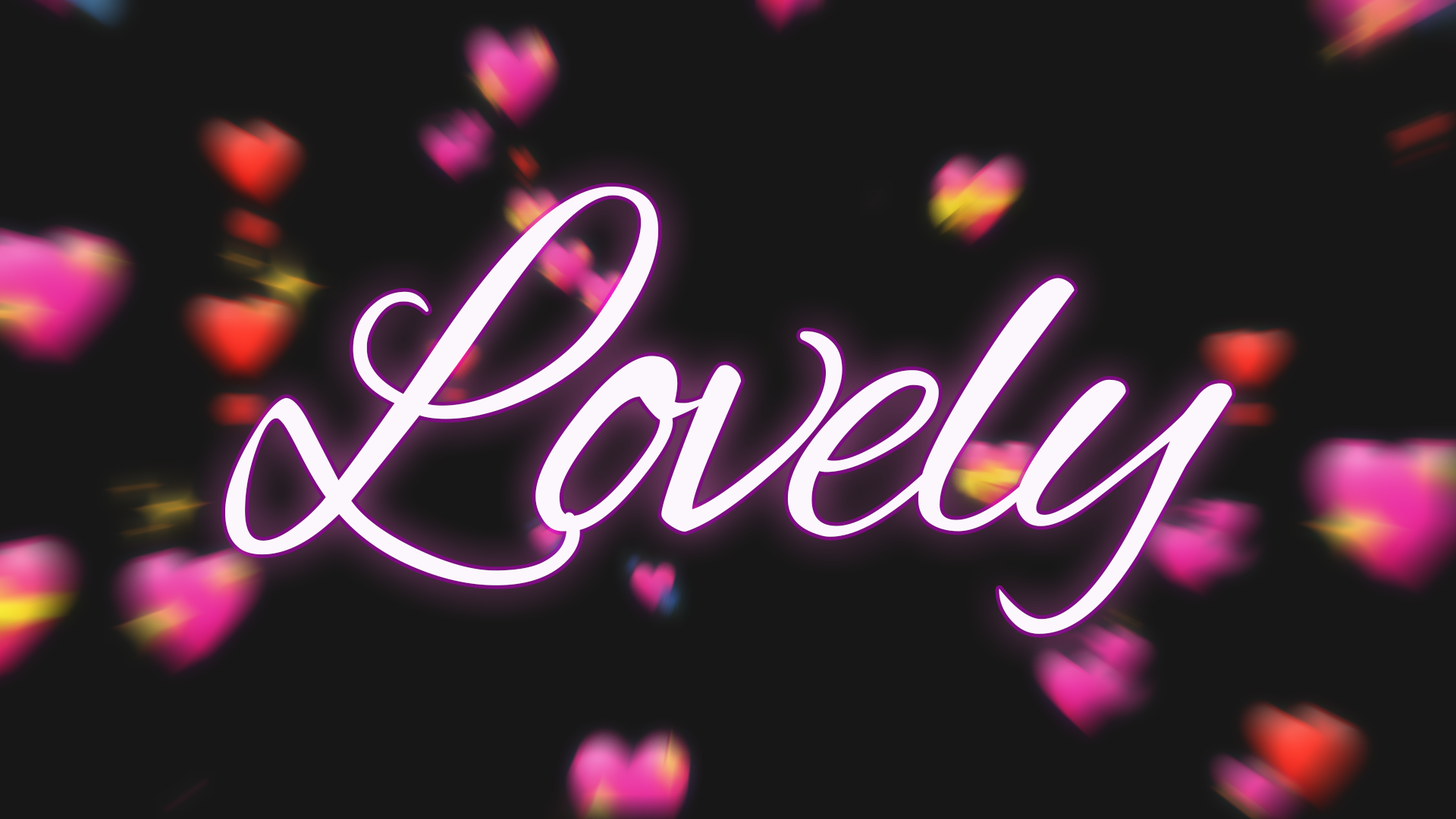
<style>
.page{position:relative;width:1456px;height:819px;background:#171717}
.page>*{position:absolute;margin:0}
.t1{font:505.5px "AlexBrush-Regular";letter-spacing:-0.03em;color:#fcf7fc}
</style>
<div class="page">
<p class="t1" style="left:225px;top:187px;width:1007px;height:447px">Lovely</p>
</div>
